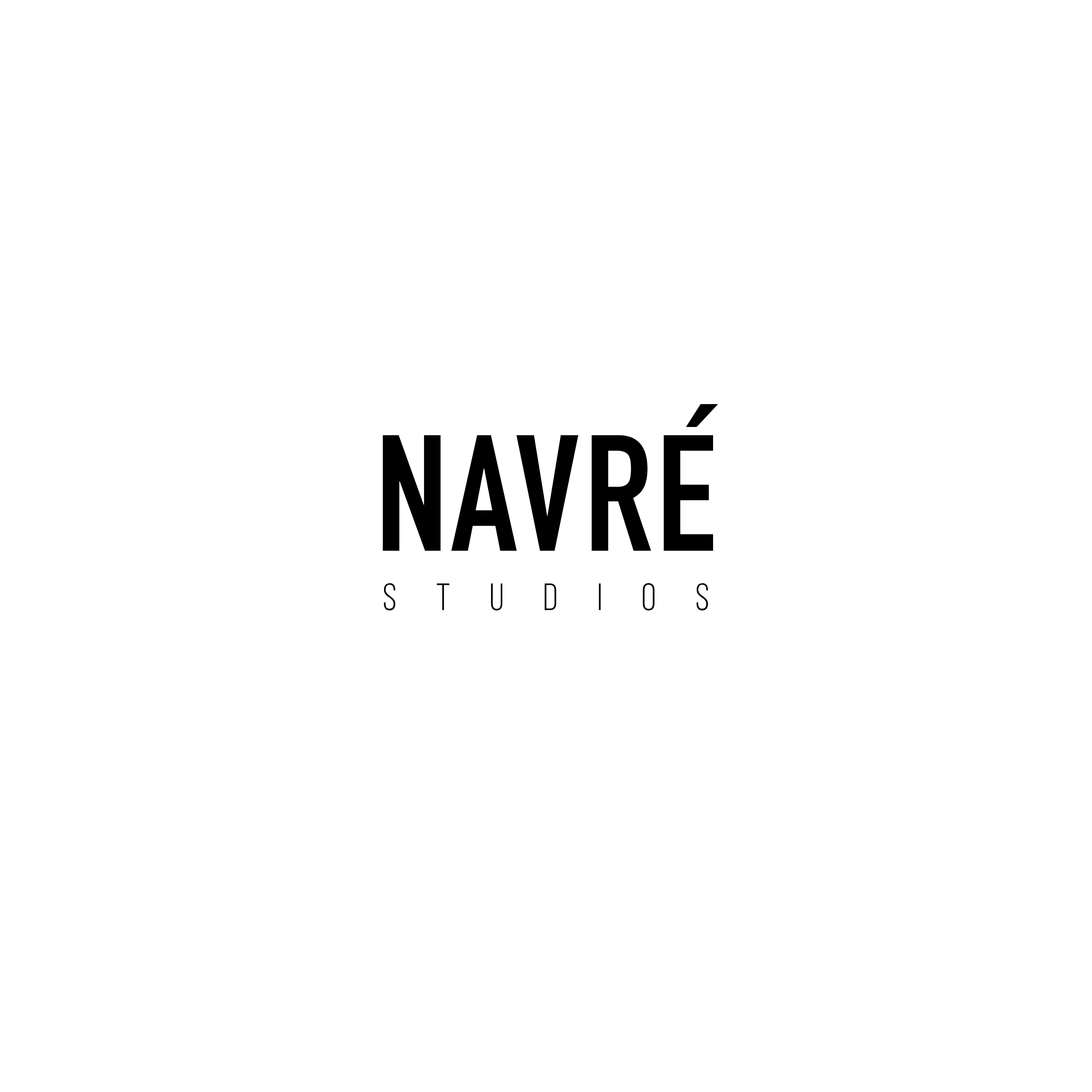
<style>
.page{position:relative;width:1092px;height:1092px;background:#ffffff}
.page>*{position:absolute;margin:0}
.t1{font:162.3px "DINCondensed-Bold";letter-spacing:0.02em;color:#000000}
.t2{font:37.9px "BebasNeueBook";letter-spacing:1.04em;color:#000000}
</style>
<div class="page">
<p class="t1" style="left:686px;top:404px;width:32px;height:23px">´</p>
<p class="t1" style="left:383px;top:435px;width:330px;height:116px">NAVRE</p>
<p class="t2" style="left:384px;top:583px;width:324px;height:28px">STUDIOS</p>
</div>
